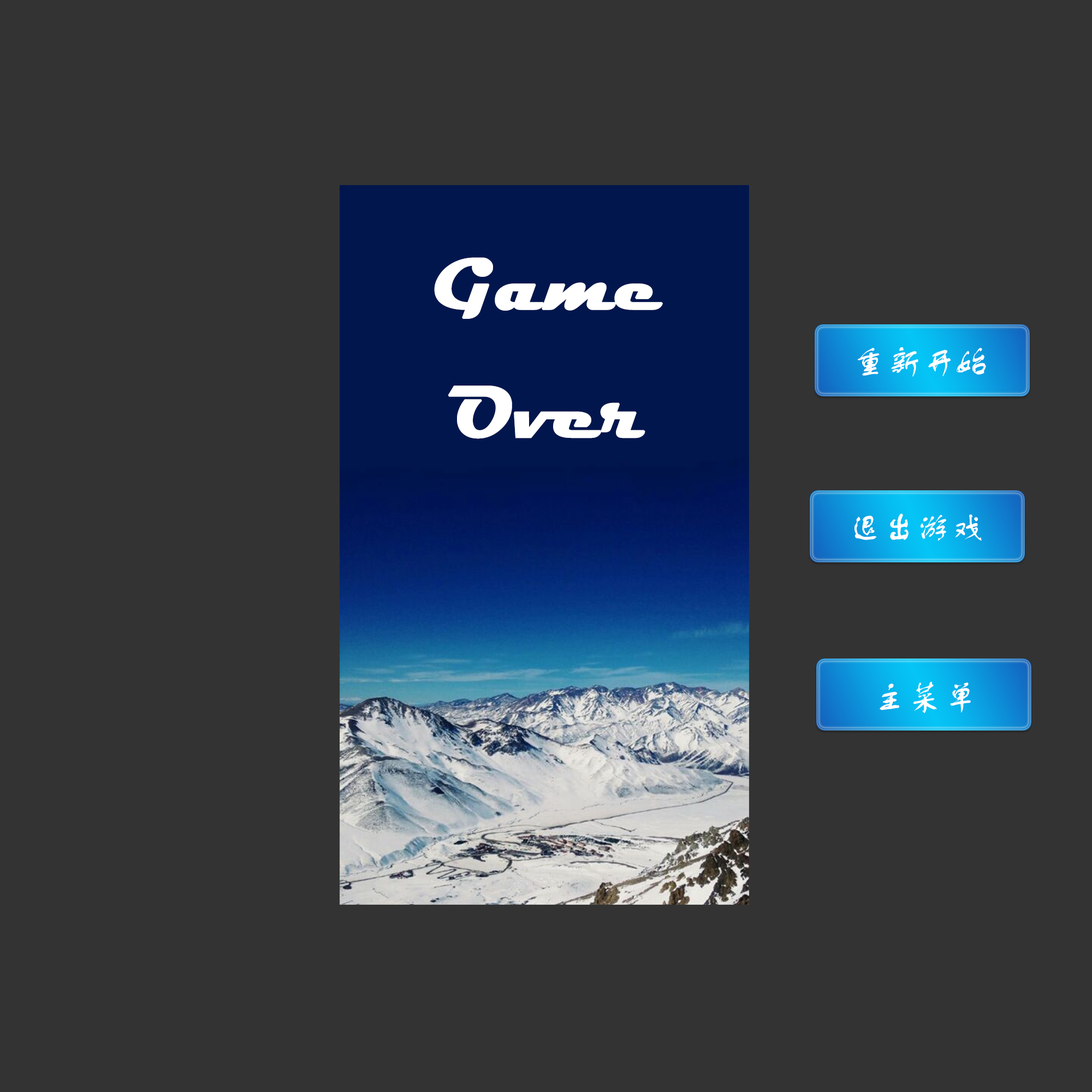
<style>
.page{position:relative;width:1092px;height:1092px;background:#333333}
.page>*{position:absolute;margin:0}
.t1{font:73.2px "Magneto-Bold";color:#ffffff;font-weight:bold}
.t2{font:34.9px "FZSTK--GBK1-0";color:#ffffff}
</style>
<div class="page">
<p class="t1" style="left:434px;top:257px;width:229px;height:182px;text-align:center">Game<br>Over</p>
<p class="t2" style="left:858px;top:347px;width:128px;height:30px">重新开始</p>
<p class="t2" style="left:854px;top:513px;width:128px;height:28px">退出游戏</p>
<p class="t2" style="left:880px;top:681px;width:91px;height:32px">主菜单</p>
</div>
